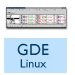
<style>
.page{position:relative;width:75px;height:75px;background:#ffffff}
.page>*{position:absolute;margin:0}
.t1{font:12px "GillSansMT";color:#003b69}
.t2{font:16px "GillSansMT";color:#003b69}
</style>
<div class="page">
<p class="t1" style="left:17px;top:43px;width:32px;height:25px;text-align:center"><span class="t2">GDE<br></span>Linux</p>
</div>
